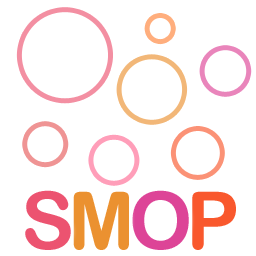
<style>
.page{position:relative;width:256px;height:256px;background:#ffffff}
.page>*{position:absolute;margin:0}
.t1{font:80px "ArialRoundedMTBold";letter-spacing:-0.075em;color:#ec5370}
.t2{font:80px "ArialRoundedMTBold";letter-spacing:-0.075em;color:#eb9130}
.t3{font:80px "ArialRoundedMTBold";letter-spacing:-0.075em;color:#dd4497}
.t4{font:80px "ArialRoundedMTBold";letter-spacing:-0.075em;color:#f9582d}
</style>
<div class="page">
<p class="t1" style="left:25px;top:190px;width:46px;height:60px">S</p>
<p class="t2" style="left:73px;top:191px;width:56px;height:59px">M</p>
<p class="t3" style="left:132px;top:190px;width:57px;height:60px">O</p>
<p class="t4" style="left:192px;top:191px;width:44px;height:59px">P</p>
</div>
